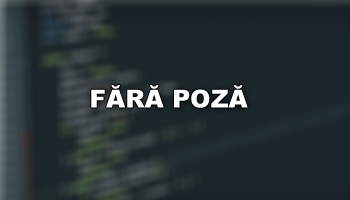
<style>
.page{position:relative;width:350px;height:200px;background:#1c272b}
.page>*{position:absolute;margin:0}
.t1{font:24.8px "Arial-Black";color:#ffffff}
</style>
<div class="page">
<p class="t1" style="left:91px;top:85px;width:157px;height:23px">FĂRĂ POZĂ</p>
</div>
